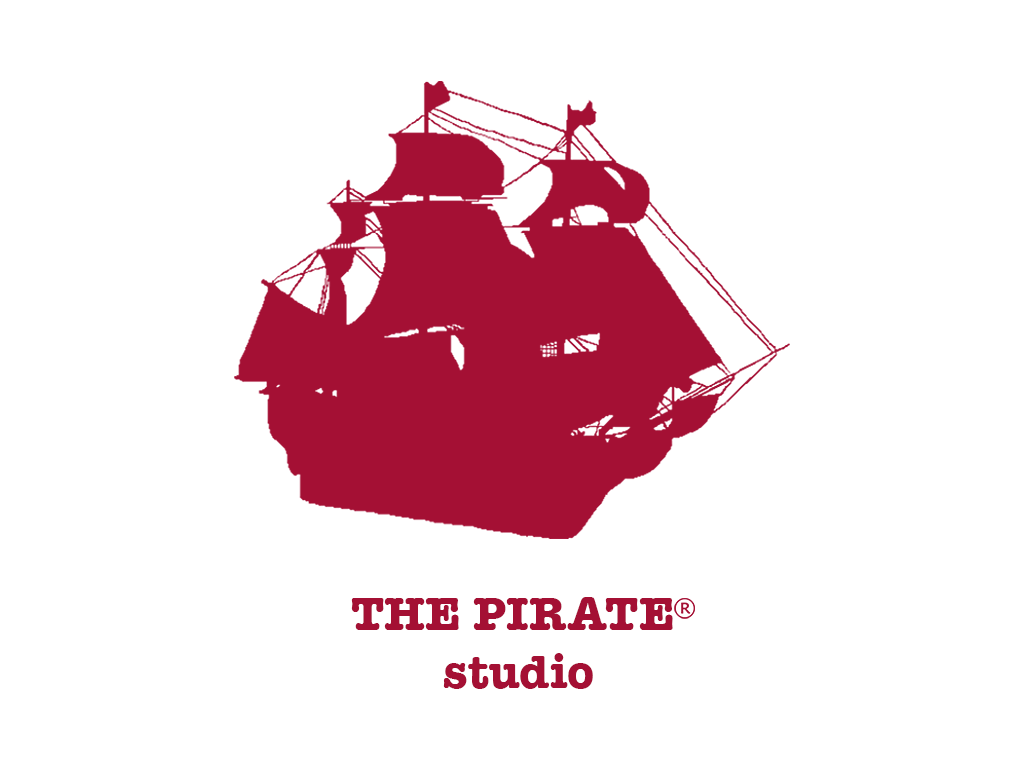
<style>
.page{position:relative;width:1024px;height:768px;background:#ffffff}
.page>*{position:absolute;margin:0}
.t1{font:48px "AmericanTypewriter-Bold";color:#a41034}
</style>
<div class="page">
<p class="t1" style="left:351px;top:597px;width:322px;height:92px;text-align:center">THE PIRATE <br>studio</p>
</div>
